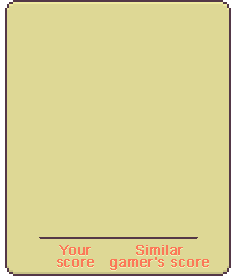
<style>
.page{position:relative;width:236px;height:276px;background:#ded895}
.page>*{position:absolute;margin:0}
.t1{font:14px/12px "ArialMT";letter-spacing:-0.01em;color:#fc7858;font-weight:bold}
</style>
<div class="page">
<p class="t1" style="left:57px;top:245px;width:37px;height:22px;text-align:center">Your<br>score</p>
<p class="t1" style="left:110px;top:245px;width:99px;height:25px;text-align:center">Similar<br>gamer’s score</p>
</div>
